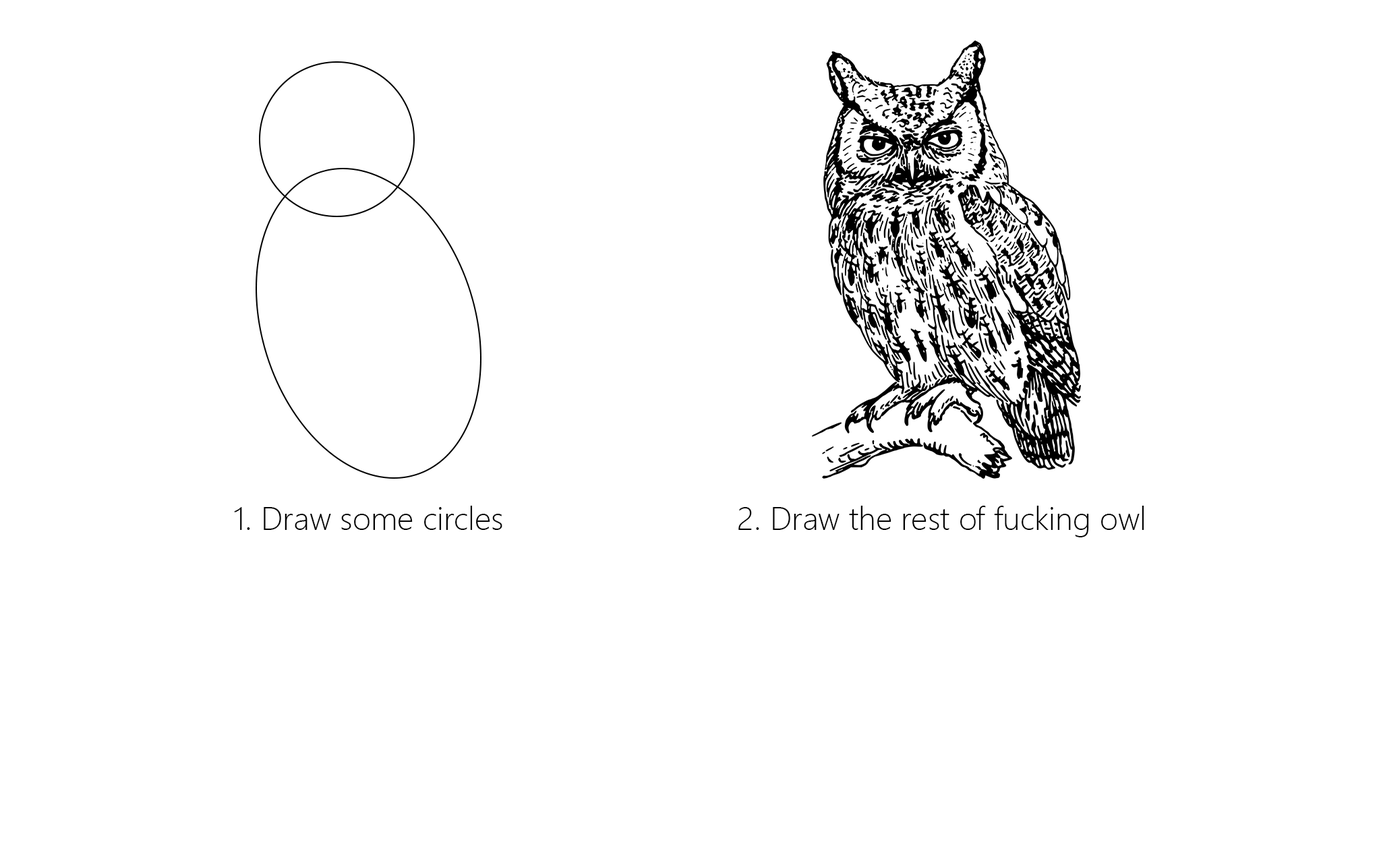
<style>
.page{position:relative;width:1381px;height:863px;background:#ffffff}
.page>*{position:absolute;margin:0}
.t1{font:32.4px "SegoeUI-Light";color:#000000}
</style>
<div class="page">
<p class="t1" style="left:234px;top:506px;width:268px;height:24px">1. Draw some circles</p>
<p class="t1" style="left:739px;top:506px;width:406px;height:32px">2. Draw the rest of fucking owl</p>
</div>
